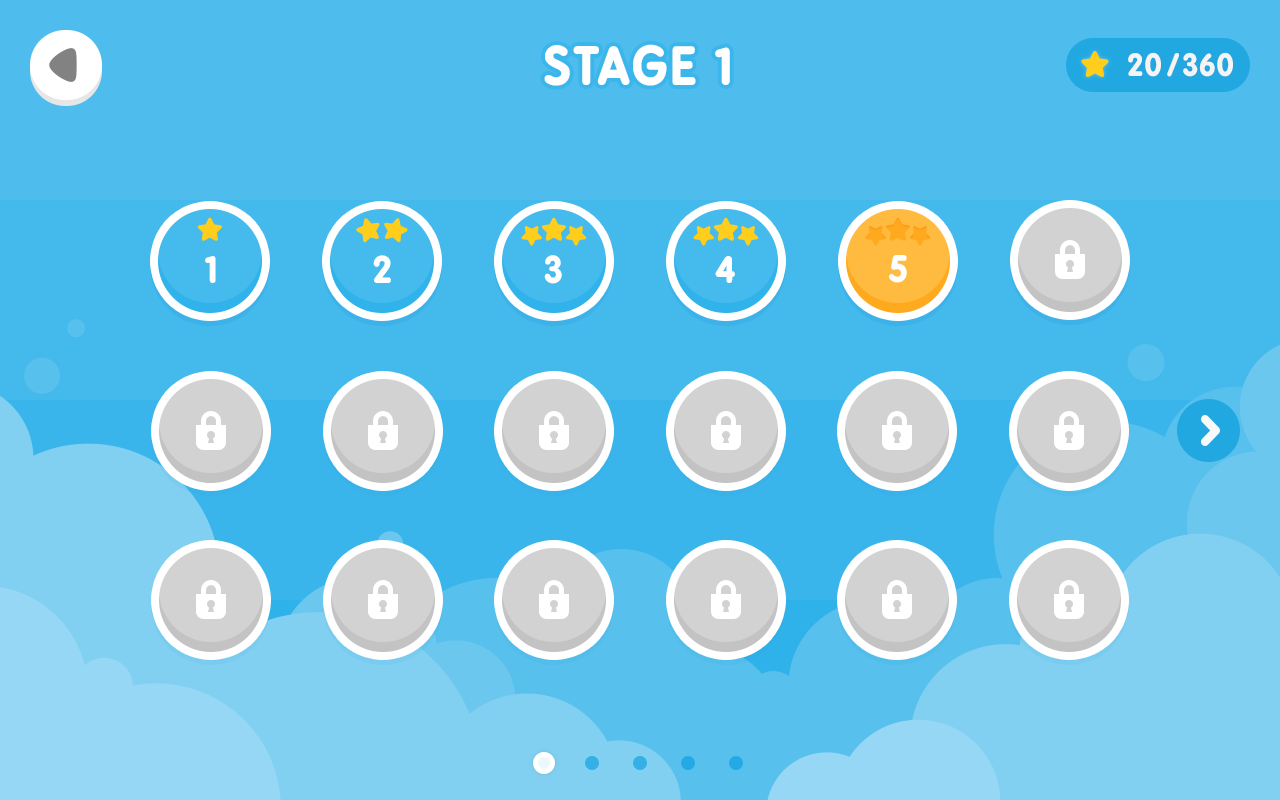
<style>
.page{position:relative;width:1280px;height:800px;background:#4ebded}
.page>*{position:absolute;margin:0}
.t1{font:50px "BPreplay-Bold";letter-spacing:0.05em;color:#ffffff;text-transform:uppercase}
.t2{font:30px "BPreplay-Bold";letter-spacing:0.025em;color:#f4f4f4;text-transform:uppercase}
.t3{font:36px "BPreplay-Bold";color:#ffffff;text-transform:uppercase}
</style>
<div class="page">
<p class="t1" style="left:544px;top:44px;width:186px;height:42px">Stage 1</p>
<p class="t2" style="left:1128px;top:52px;width:105px;height:25px">20/360</p>
<p class="t3" style="left:205px;top:256px;width:11px;height:27px">1</p>
<p class="t3" style="left:373px;top:255px;width:18px;height:28px">2</p>
<p class="t3" style="left:544px;top:255px;width:18px;height:29px">3</p>
<p class="t3" style="left:715px;top:256px;width:20px;height:27px">4</p>
<p class="t3" style="left:889px;top:255px;width:18px;height:28px">5</p>
</div>
